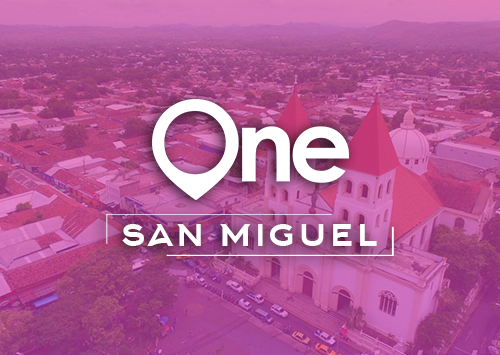
<style>
.page{position:relative;width:500px;height:355px}
.page>*{position:absolute;margin:0}
.t1{font:43.4px "Arkhip";color:#ffffff}
</style>
<div class="page">
<p class="t1" style="left:122px;top:224px;width:255px;height:22px">san miguel</p>
</div>
